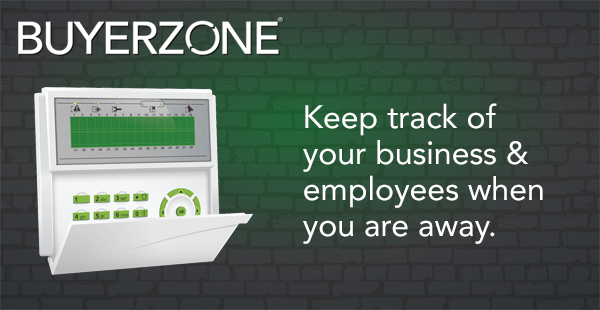
<style>
.page{position:relative;width:600px;height:310px}
.page>*{position:absolute;margin:0}
.t1{font:32px/36px "Avenir-Roman";color:#ffffff}
</style>
<div class="page">
<p class="t1" style="left:303px;top:103px;width:240px;height:141px">Keep track of your business &amp; employees when you are away.</p>
</div>
